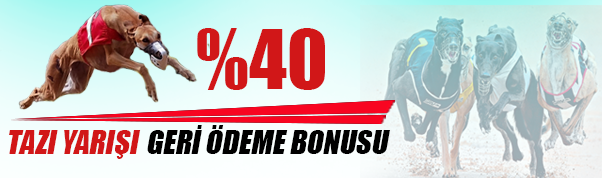
<style>
.page{position:relative;width:602px;height:178px}
.page>*{position:absolute;margin:0}
.t1{font:76px "Impact";color:#d11718}
.t2{font:30px "Impact";color:#000000;font-style:italic}
.t3{font:30px "Impact";color:#d11718;font-style:italic}
</style>
<div class="page">
<p class="t1" style="left:197px;top:28px;width:128px;height:62px">%40</p>
<p class="t2" style="left:147px;top:125px;width:243px;height:29px">GERİ ÖDEME BONUSU</p>
<p class="t3" style="left:9px;top:130px;width:132px;height:29px">TAZI YARIŞI</p>
</div>
